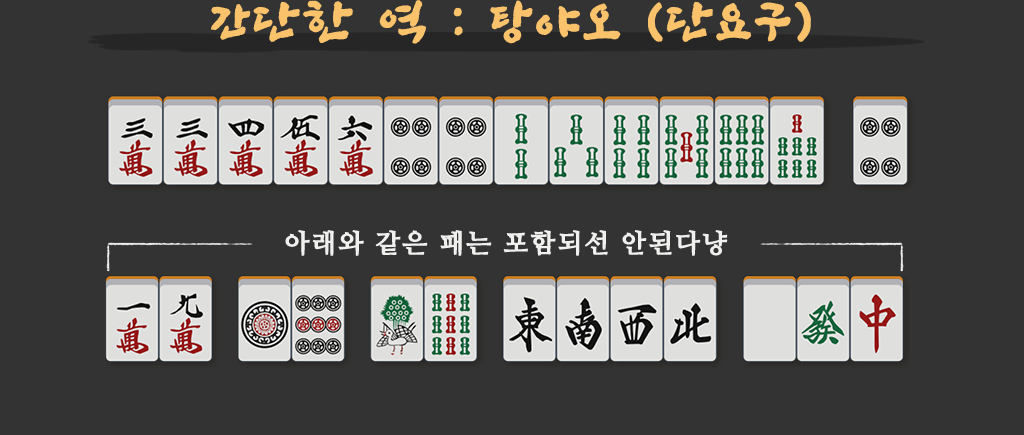
<style>
.page{position:relative;width:1024px;height:435px;background:#333333}
.page>*{position:absolute;margin:0}
.t1{font:48px "SangSangRockOTF";letter-spacing:0.06em;color:#fac26a;font-weight:bold}
.t2{font:26px "NanumMyeongjoBold";letter-spacing:0.06em;color:#f0f0ef;font-weight:bold}
</style>
<div class="page">
<p class="t1" style="left:211px;top:0px;width:600px;height:44px">간단한 역 : 탕야오 (단요구)</p>
<p class="t2" style="left:285px;top:230px;width:443px;height:26px">아래와 같은 패는 포함되선 안된다냥</p>
</div>
